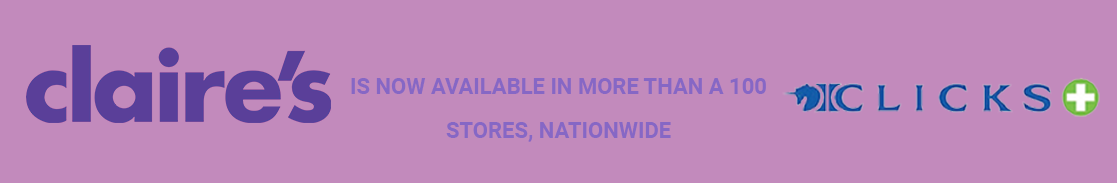
<style>
.page{position:relative;width:1117px;height:183px;background:#c28abc}
.page>*{position:absolute;margin:0}
.t1{font:22px "Roboto-Bold";color:#8667c5}
</style>
<div class="page">
<p class="t1" style="left:351px;top:78px;width:415px;height:16px">IS NOW AVAILABLE IN MORE THAN A 100</p>
<p class="t1" style="left:446px;top:122px;width:225px;height:20px">STORES, NATIONWIDE</p>
</div>
